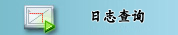
<style>
.page{position:relative;width:178px;height:35px}
.page>*{position:absolute;margin:0}
.t1{font:14px "STKaiti";color:#000000;font-weight:bold}
</style>
<div class="page">
<p class="t1" style="left:92px;top:9px;width:52px;height:14px">日志查询</p>
</div>
